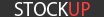
<style>
.page{position:relative;width:104px;height:17px;background:#333333}
.page>*{position:absolute;margin:0}
.t1{font:18px "KozGoPro-Regular";color:#ffffff}
.t2{font:18px "KozGoPro-Regular";color:#ff3f3f}
</style>
<div class="page">
<p class="t1" style="left:14px;top:2px;width:76px;height:14px">STOCK<span class="t2">UP</span></p>
</div>
